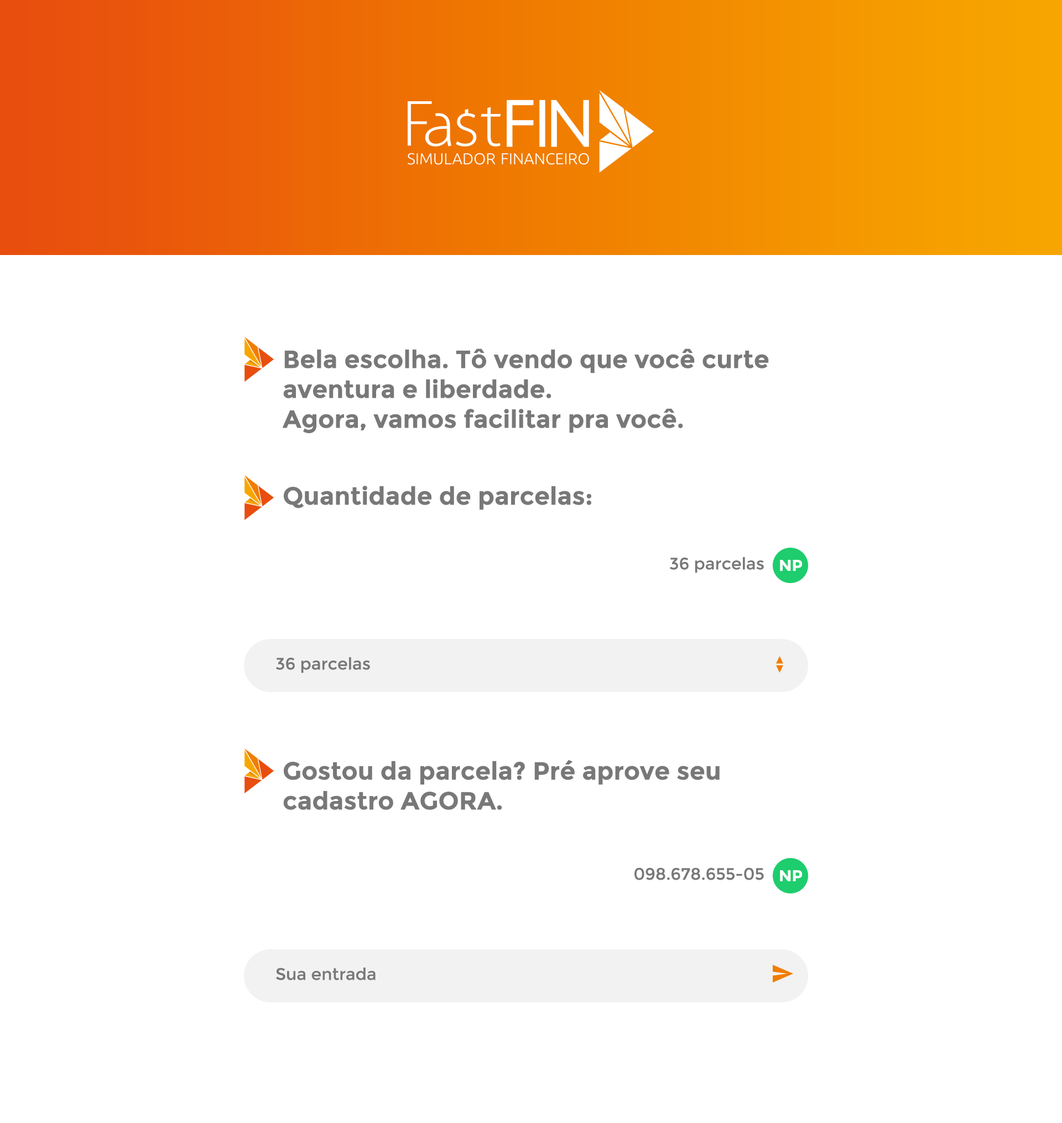
<style>
.page{position:relative;width:1062px;height:1123px;background:#ffffff}
.page>*{position:absolute;margin:0}
.t1{font:24.9px/29.9px "Montserrat-Bold";color:#797878}
.t2{font:24.9px "Montserrat-Bold";color:#797878}
.t3{font:16.6px "Montserrat-Regular";color:#797878}
.t4{font:15.6px "Montserrat-Bold";color:#ffffff}
</style>
<div class="page">
<p class="t1" style="left:282px;top:348px;width:487px;height:85px">Bela escolha. Tô vendo que você curte<br>aventura e liberdade.<br>Agora, vamos facilitar pra você.</p>
<p class="t2" style="left:284px;top:486px;width:307px;height:24px">Quantidade de parcelas:</p>
<p class="t3" style="left:670px;top:557px;width:94px;height:16px">36 parcelas</p>
<p class="t4" style="left:780px;top:560px;width:22px;height:11px">NP</p>
<p class="t3" style="left:276px;top:657px;width:94px;height:16px">36 parcelas</p>
<p class="t1" style="left:283px;top:759px;width:437px;height:51px">Gostou da parcela? Pré aprove seu<br>cadastro AGORA.</p>
<p class="t3" style="left:634px;top:867px;width:130px;height:13px">098.678.655-05</p>
<p class="t4" style="left:780px;top:870px;width:22px;height:11px">NP</p>
<p class="t3" style="left:276px;top:967px;width:100px;height:13px">Sua entrada</p>
</div>
